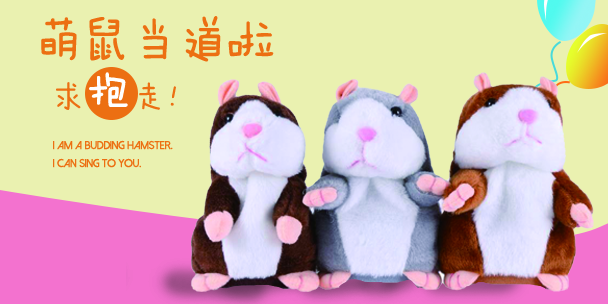
<style>
.page{position:relative;width:608px;height:304px;background:#eaf1b0}
.page>*{position:absolute;margin:0}
.t1{font:48px "FZMWJW--GB1-0";color:#ec6f12}
.t2{font:30.1px "FZMWJW--GB1-0";letter-spacing:0.05em;color:#ec6f12}
.t3{font:48px "FZMWJW--GB1-0";letter-spacing:0.05em;color:#ffffff}
.t4{font:11px/18px "DolceVita";color:#ec6f12;font-weight:bold}
</style>
<div class="page">
<p class="t1" style="left:41px;top:16px;width:233px;height:46px">萌鼠当道啦</p>
<p class="t2" style="left:56px;top:72px;width:120px;height:38px">求<span class="t3">抱</span>走！</p>
<p class="t4" style="left:53px;top:140px;width:120px;height:28px">I am a budding hamster. <br>I can sing to you.</p>
</div>
